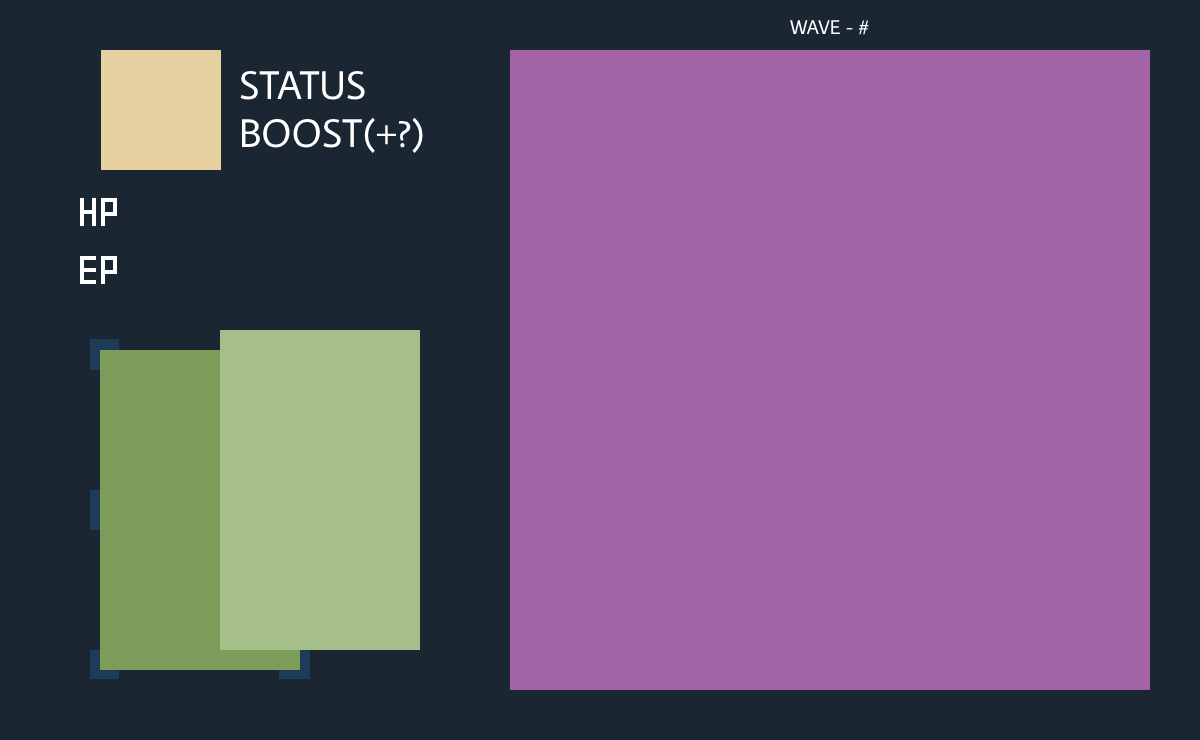
<style>
.page{position:relative;width:1200px;height:740px;background:#a263a7}
.page>*{position:absolute;margin:0}
.t1{font:20px "AverageSans-Regular";color:#ffffff}
.t2{font:40px "AverageSans-Regular";color:#ffffff}
</style>
<div class="page">
<p class="t1" style="left:790px;top:20px;width:79px;height:15px">WAVE - #</p>
<p class="t2" style="left:240px;top:70px;width:183px;height:83px">STATUS<br>BOOST(+?)</p>
</div>
